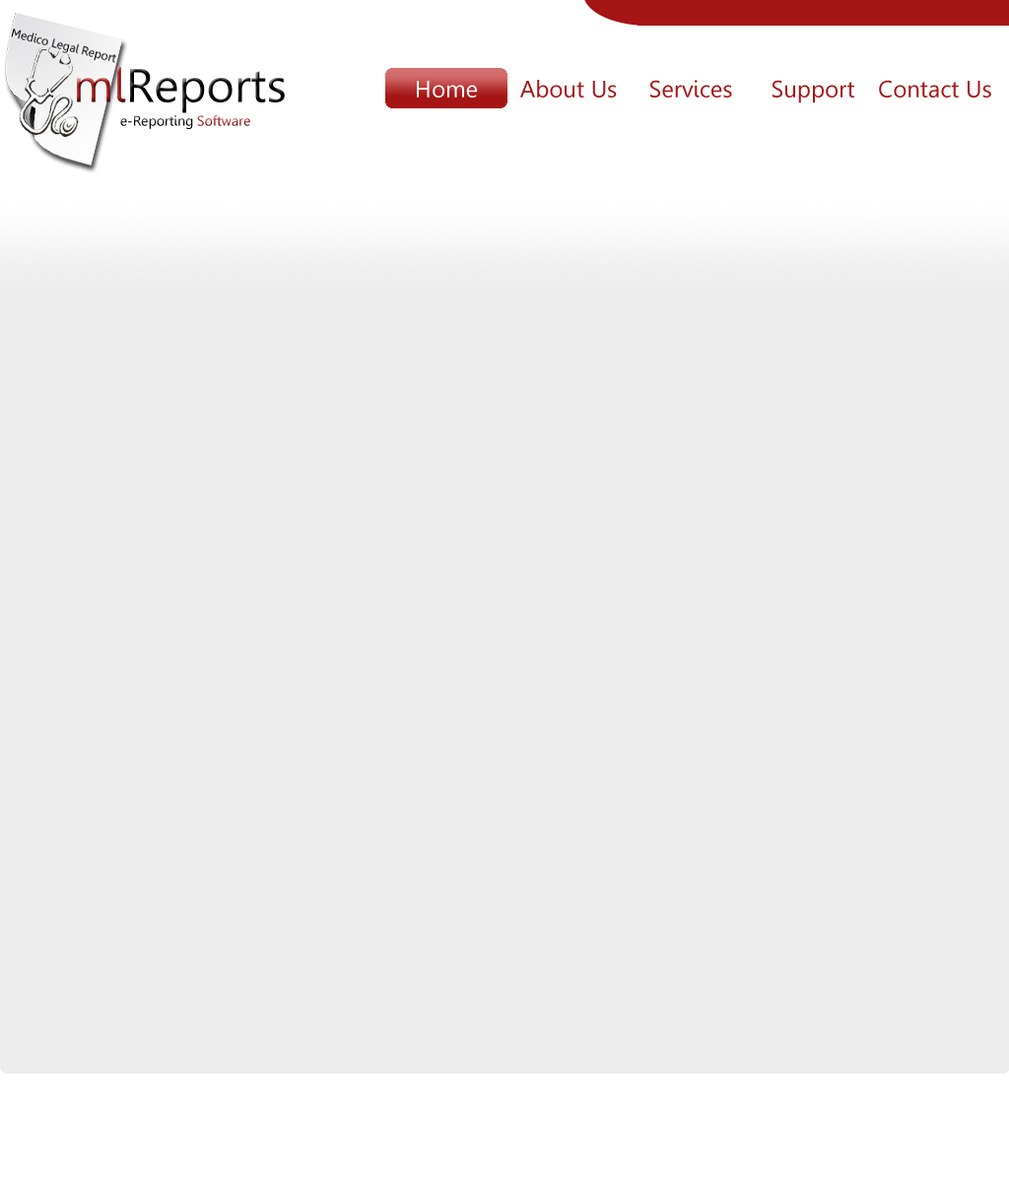
<style>
.page{position:relative;width:1009px;height:1182px;background:#ededed}
.page>*{position:absolute;margin:0}
.t1{font:13.8px "Gisha"}
.t2{font:47.3px "Gisha"}
.t3{font:23.6px "Gisha";color:#fdfdfd}
.t4{font:23.6px "Gisha";color:#a61515}
</style>
<div class="page">
<p class="t1" style="left:77px;top:67px;width:208px;height:62px"><span class="t2">ml</span><span class="t2">Reports<br><br></span>e-Reporting Software</p>
<p class="t3" style="left:417px;top:81px;width:60px;height:17px">Home</p>
<p class="t4" style="left:520px;top:80px;width:97px;height:18px">About Us</p>
<p class="t4" style="left:650px;top:80px;width:82px;height:18px">Services</p>
<p class="t4" style="left:772px;top:80px;width:82px;height:23px">Support</p>
<p class="t4" style="left:879px;top:80px;width:112px;height:18px">Contact Us</p>
</div>
